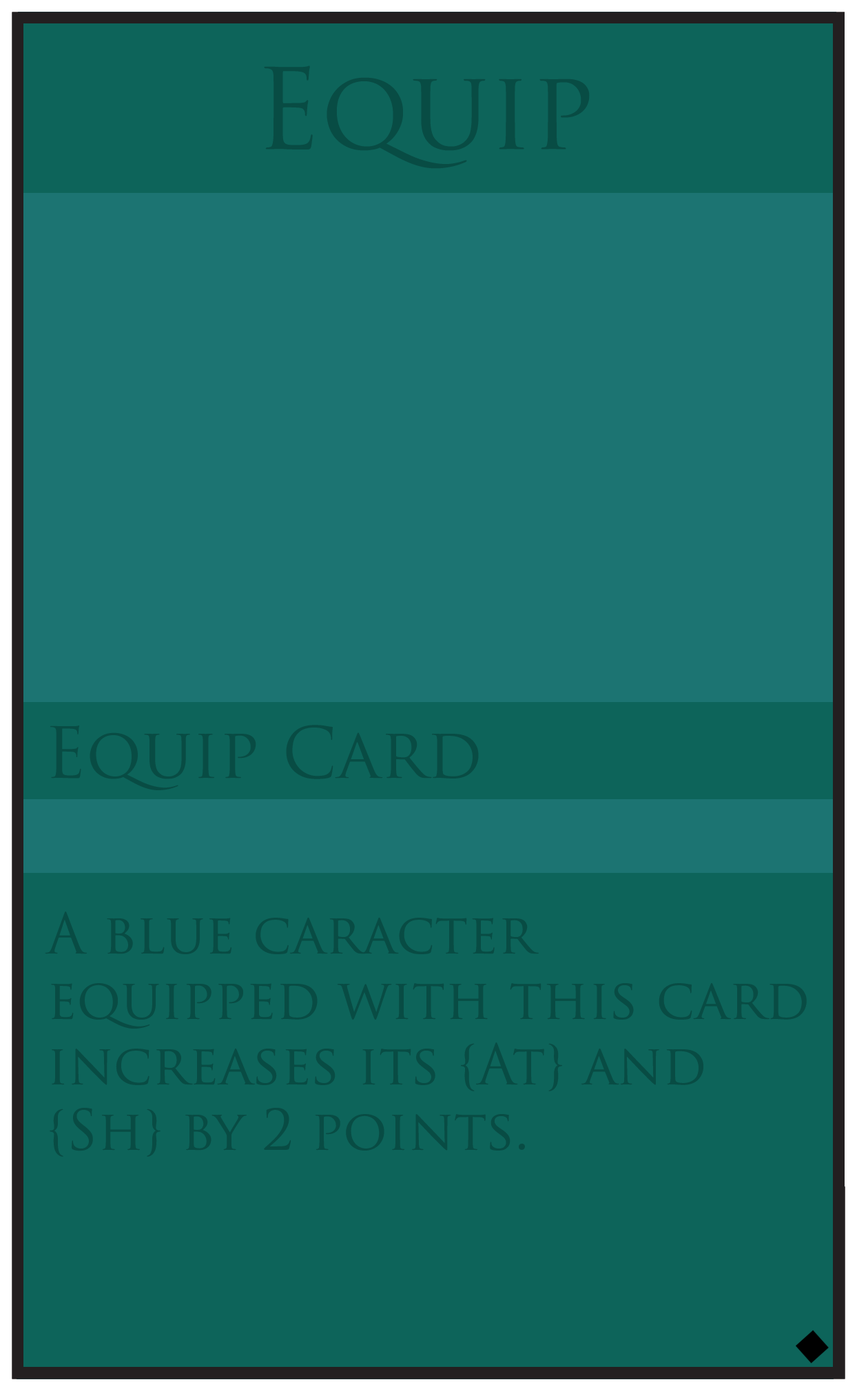
<style>
.page{position:relative;width:857px;height:1391px;background:#0d645a}
.page>*{position:absolute;margin:0}
.t1{font:109.1px "TrajanPro-Regular";color:#084c44}
.t2{font:68.9px "TrajanPro-Regular";color:#084c44}
.t3{font:54.5px "TrajanPro-Regular";color:#084c44}
</style>
<div class="page">
<p class="t1" style="left:264px;top:65px;width:326px;height:104px">Equip</p>
<p class="t2" style="left:50px;top:725px;width:429px;height:65px">Equip Card</p>
<p class="t3" style="left:45px;top:912px;width:762px;height:245px">A blue caracter <br>equipped with this card <br>increases its {At} and <br>{Sh} by 2 points.</p>
</div>
